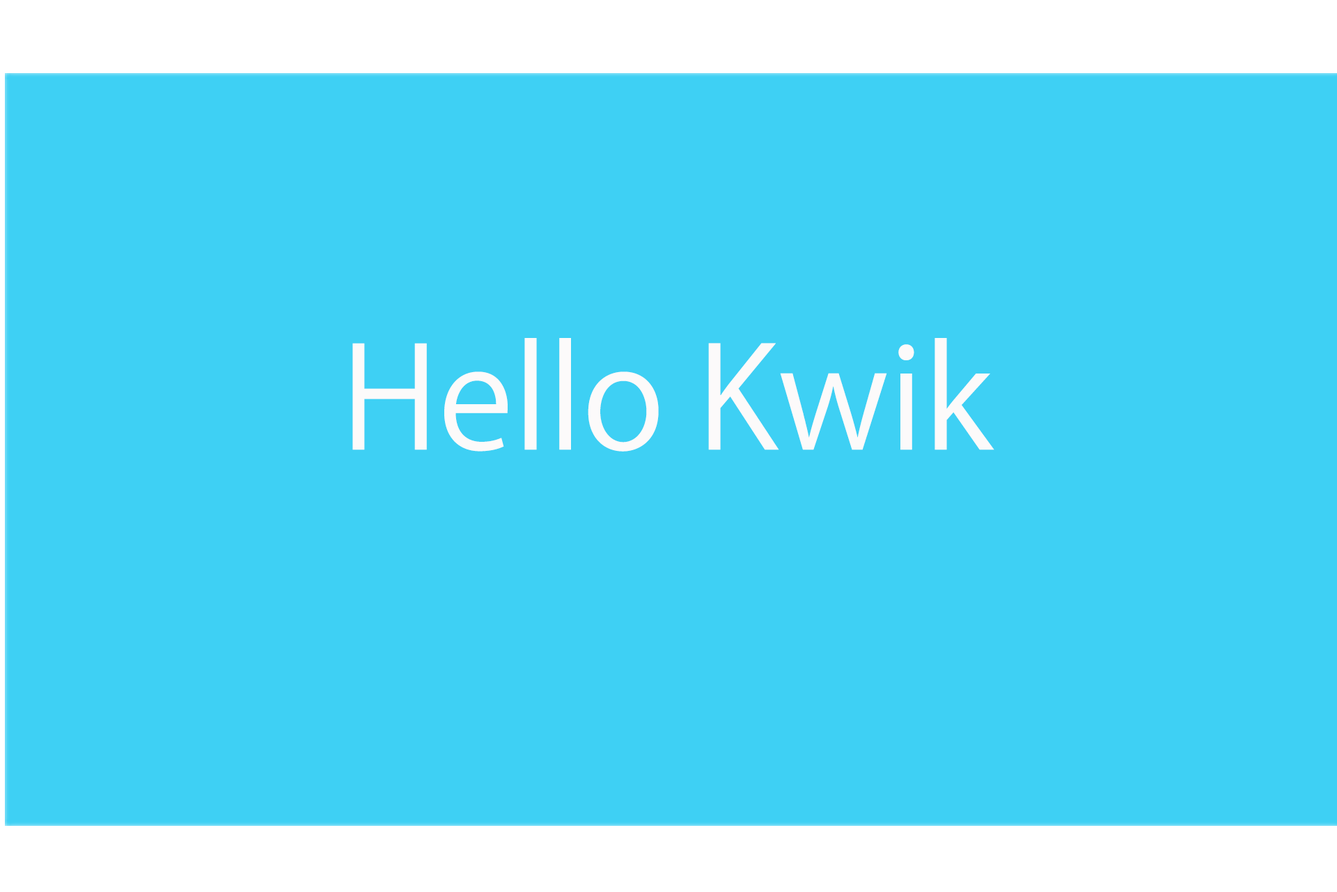
<style>
.page{position:relative;width:1337px;height:892px;background:#3ed0f4}
.page>*{position:absolute;margin:0}
.t1{font:139.3px "KozGoPr6N-Regular";color:#fcfafa}
</style>
<div class="page">
<p class="t1" style="left:352px;top:338px;width:643px;height:113px">Hello Kwik</p>
</div>
